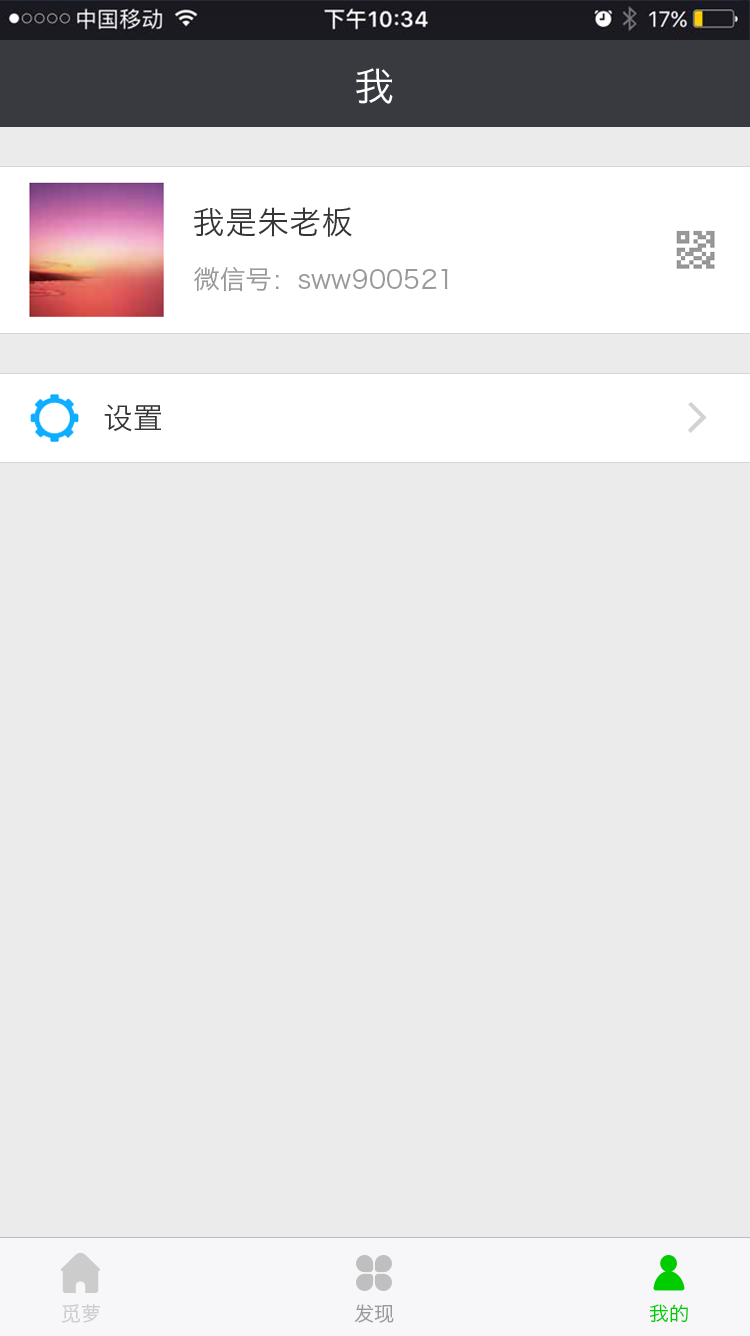
<style>
.page{position:relative;width:750px;height:1336px;background:#ebebeb}
.page>*{position:absolute;margin:0}
.t1{font:40px "HiraginoSansGB-W3";color:#ffffff}
.t2{font:32px "HiraginoSansGB-W3";color:#353535}
.t3{font:26px "HiraginoSansGB-W3";color:#999999}
.t4{font:30px "HiraginoSansGB-W3";color:#353535}
.t5{font:20px "HiraginoSansGB-W3";color:#cccccc}
.t6{font:20px "HiraginoSansGB-W3";color:#999999}
.t7{font:20px "HiraginoSansGB-W3";color:#00cc00}
</style>
<div class="page">
<p class="t1" style="left:356px;top:68px;width:37px;height:36px">我</p>
<p class="t2" style="left:194px;top:207px;width:158px;height:30px">我是朱老板</p>
<p class="t3" style="left:194px;top:267px;width:254px;height:25px">微信号：sww900521</p>
<p class="t4" style="left:104px;top:404px;width:57px;height:28px">设置</p>
<p class="t5" style="left:61px;top:1304px;width:39px;height:19px">觅萝</p>
<p class="t6" style="left:354px;top:1304px;width:40px;height:19px">发现</p>
<p class="t7" style="left:649px;top:1304px;width:39px;height:19px">我的</p>
</div>
